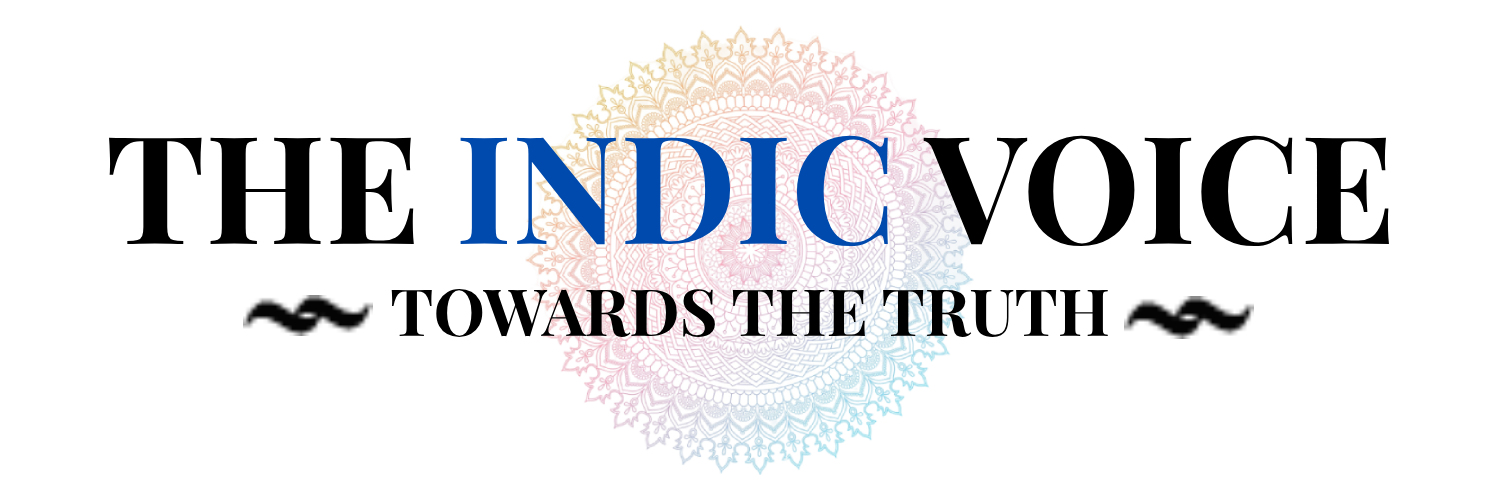
<style>
.page{position:relative;width:1500px;height:500px;background:#ffffff}
.page>*{position:absolute;margin:0}
.t1{font:150px "PlayfairDisplay-Bold";color:#004aad}
.t2{font:150px "PlayfairDisplay-Bold";color:#000000}
.t3{font:65px "PlayfairDisplay-Bold";color:#000000}
</style>
<div class="page">
<p class="t1" style="left:109px;top:135px;width:1280px;height:112px"><span class="t2">THE </span>INDIC <span class="t2">VOICE</span></p>
<p class="t3" style="left:391px;top:289px;width:717px;height:48px">TOWARDS THE TRUTH</p>
</div>
